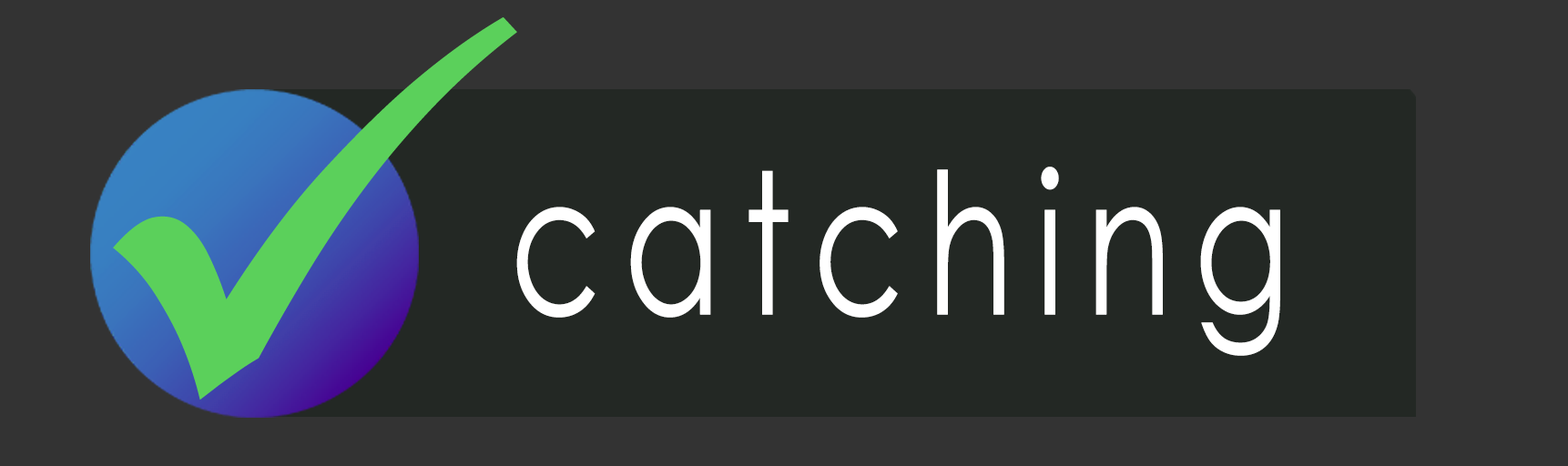
<style>
.page{position:relative;width:1568px;height:466px;background:#232824}
.page>*{position:absolute;margin:0}
.t1{font:196.5px "CenturyGothic";letter-spacing:0.125em;color:#ffffff;font-weight:bold;scale:0.73 1}
</style>
<div class="page">
<p class="t1" style="left:516px;top:167px;width:764px;height:189px">catching</p>
</div>
